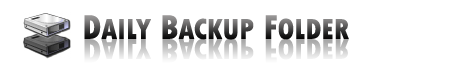
<style>
.page{position:relative;width:453px;height:69px;background:#ffffff}
.page>*{position:absolute;margin:0}
.t1{font:30px "TwCenMT-CondensedExtraBold"}
.t2{font:36px "TwCenMT-CondensedExtraBold"}
</style>
<div class="page">
<p class="t1" style="left:84px;top:15px;width:265px;height:25px"><span class="t2">D</span>AILY<span class="t2"> B</span>ACKUP<span class="t2"> F</span>OLDER</p>
<p class="t1" style="left:84px;top:38px;width:265px;height:25px"><span class="t2">D</span>AILY<span class="t2"> B</span>ACKUP<span class="t2"> F</span>OLDER</p>
</div>
